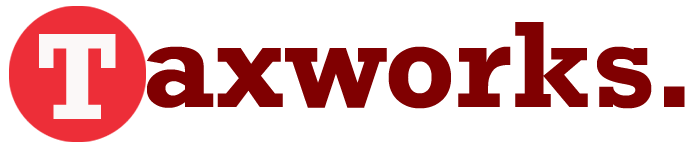
<style>
.page{position:relative;width:690px;height:147px;background:#ffffff}
.page>*{position:absolute;margin:0}
.t1{font:125px "Rockwell-Bold";color:#800001}
.t2{font:125px "Rockwell-Bold";color:#fbf8f8}
</style>
<div class="page">
<p class="t1" style="left:147px;top:22px;width:538px;height:87px">axworks.</p>
<p class="t2" style="left:39px;top:34px;width:77px;height:85px">T</p>
</div>
